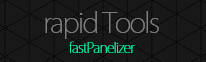
<style>
.page{position:relative;width:206px;height:62px;background:#181818}
.page>*{position:absolute;margin:0}
.t1{font:28px "KozGoPr6N-ExtraLight";letter-spacing:-0.06em;color:#7f7f7f}
.t2{font:14px "KozGoPr6N-ExtraLight";letter-spacing:-0.06em;color:#02f0a4}
</style>
<div class="page">
<p class="t1" style="left:45px;top:11px;width:114px;height:28px">rapid Tools</p>
<p class="t2" style="left:68px;top:41px;width:67px;height:12px">fastPanelizer</p>
</div>
